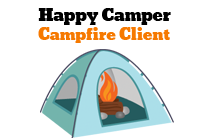
<style>
.page{position:relative;width:210px;height:140px;background:#ffffff}
.page>*{position:absolute;margin:0}
.t1{font:15.5px "Bevan";color:#f67900}
.t2{font:16.5px "Bevan";color:#000000}
</style>
<div class="page">
<p class="t1" style="left:38px;top:8px;width:133px;height:35px"><span class="t2">Happy Camper<br></span>Campfire Client</p>
</div>
